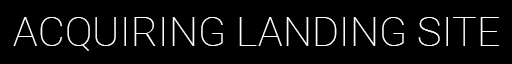
<style>
.page{position:relative;width:512px;height:64px;background:#000000}
.page>*{position:absolute;margin:0}
.t1{font:41.3px "Roboto-Thin";color:#ffffff;text-transform:uppercase}
</style>
<div class="page">
<p class="t1" style="left:13px;top:17px;width:486px;height:34px">ACQUIRING LANDING SITE</p>
</div>
